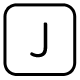
<style>
.page{position:relative;width:80px;height:80px;background:#ffffff}
.page>*{position:absolute;margin:0}
.t1{font:48px "NanumSquareRoundR";color:#000000}
</style>
<div class="page">
<p class="t1" style="left:30px;top:22px;width:18px;height:36px">J</p>
</div>
